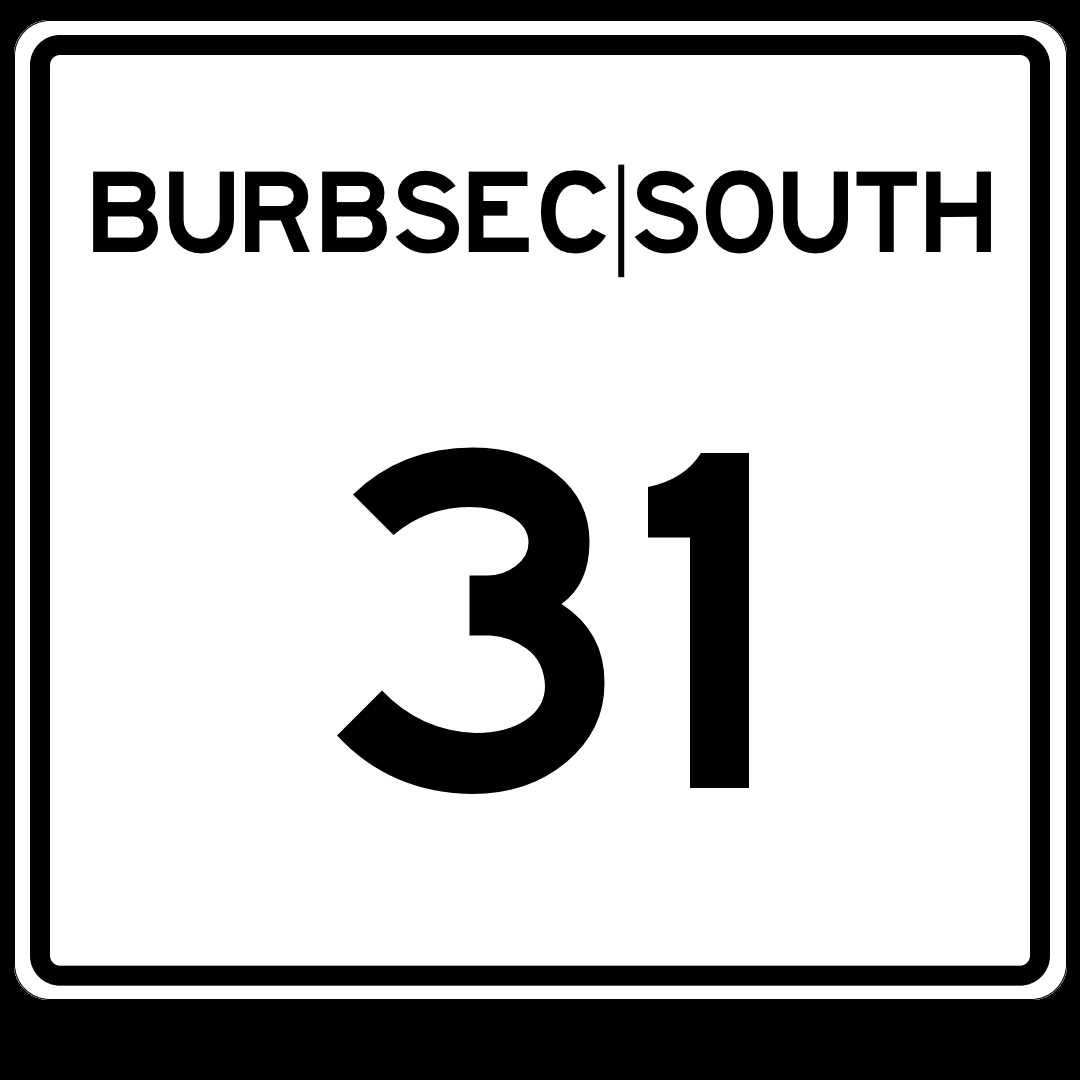
<style>
.page{position:relative;width:1080px;height:1080px;background:#ffffff}
.page>*{position:absolute;margin:0}
.t1{font:120px "HighwayGothicWide";letter-spacing:-0.04em;color:#000000}
.t2{font:500px "HighwayGothicWide";letter-spacing:-0.04em;color:#000000}
</style>
<div class="page">
<p class="t1" style="left:93px;top:164px;width:898px;height:114px">BURBSEC|SOUTH</p>
<p class="t2" style="left:337px;top:447px;width:412px;height:347px">31</p>
</div>
